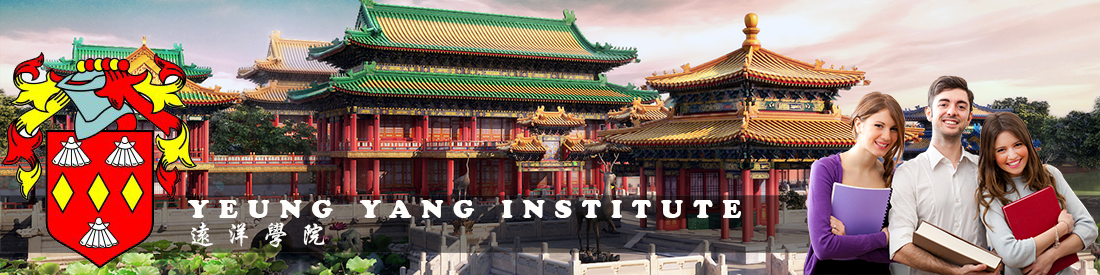
<style>
.page{position:relative;width:1100px;height:275px}
.page>*{position:absolute;margin:0}
.t1{font:26.7px/26.4px "CooperBlack";letter-spacing:0.38em;color:#fefefc}
.t2{font:26.7px/26.4px "FZXKFW--GB1-0";letter-spacing:0.38em;color:#fbfbf9}
</style>
<div class="page">
<p class="t1" style="left:188px;top:200px;width:553px;height:48px">YEUNG YANG INSTITUTE<br><span class="t2">远洋学院</span></p>
</div>
